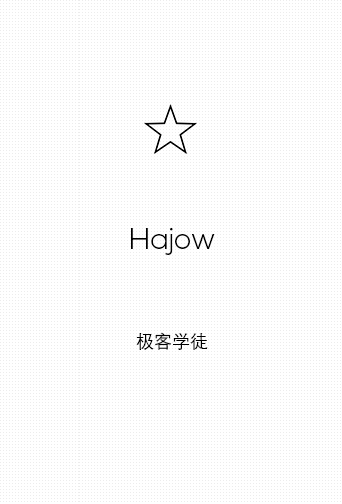
<style>
.page{position:relative;width:342px;height:504px;background:#ffffff}
.page>*{position:absolute;margin:0}
.t1{font:30px "NexaLight";color:#000000}
.t2{font:18px "DengXian-Regular";color:#000000}
</style>
<div class="page">
<p class="t1" style="left:131px;top:227px;width:84px;height:28px">Hajow</p>
<p class="t2" style="left:136px;top:332px;width:72px;height:18px">极客学徒</p>
</div>
